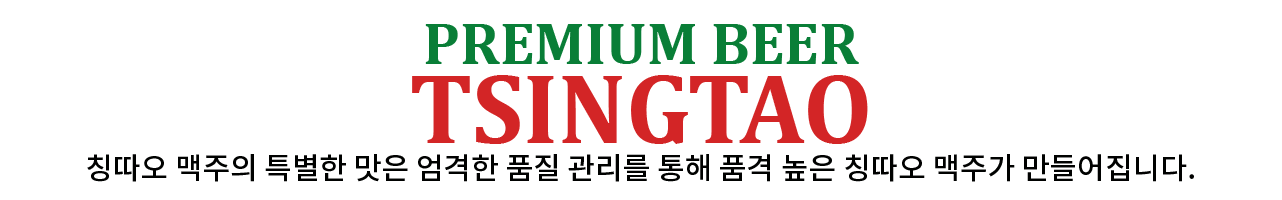
<style>
.page{position:relative;width:1282px;height:200px;background:#ffffff}
.page>*{position:absolute;margin:0}
.t1{font:30px/36px "NotoSansKR-Medium";color:#000100}
.t2{font:60px/79px "Cambria-Bold";color:#097e37}
.t3{font:100px/79px "Cambria-Bold";color:#d32526}
</style>
<div class="page">
<p class="t1" style="left:87px;top:24px;width:1107px;height:158px;text-align:center"><span class="t2">PREMIUM BEER<br></span><span class="t3">TSINGTAO<br></span>칭따오 맥주의 특별한 맛은 엄격한 품질 관리를 통해 품격 높은 칭따오 맥주가 만들어집니다.</p>
</div>
